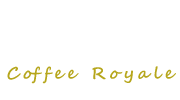
<style>
.page{position:relative;width:180px;height:100px;background:#ffffff}
.page>*{position:absolute;margin:0}
.t1{font:28.7px "SegoeScript-Bold";letter-spacing:0.25em;color:#b6a61c}
</style>
<div class="page">
<p class="t1" style="left:7px;top:66px;width:169px;height:18px">Coffee Royale</p>
</div>
